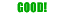
<style>
.page{position:relative;width:64px;height:16px;background:#ffffff}
.page>*{position:absolute;margin:0}
.t1{font:12px "Impact";color:#00a800}
</style>
<div class="page">
<p class="t1" style="left:17px;top:2px;width:30px;height:11px">GOOD!</p>
</div>
